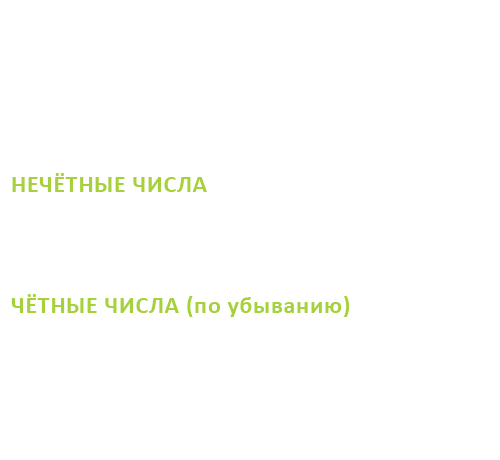
<style>
.page{position:relative;width:500px;height:460px;background:#ffffff}
.page>*{position:absolute;margin:0}
.t1{font:24px "Calibri-Bold";letter-spacing:0.03em;color:#a6d13d}
</style>
<div class="page">
<p class="t1" style="left:12px;top:173px;width:195px;height:19px">НЕЧЁТНЫЕ ЧИСЛА</p>
<p class="t1" style="left:11px;top:294px;width:339px;height:23px">ЧЁТНЫЕ ЧИСЛА (по убыванию)</p>
</div>
